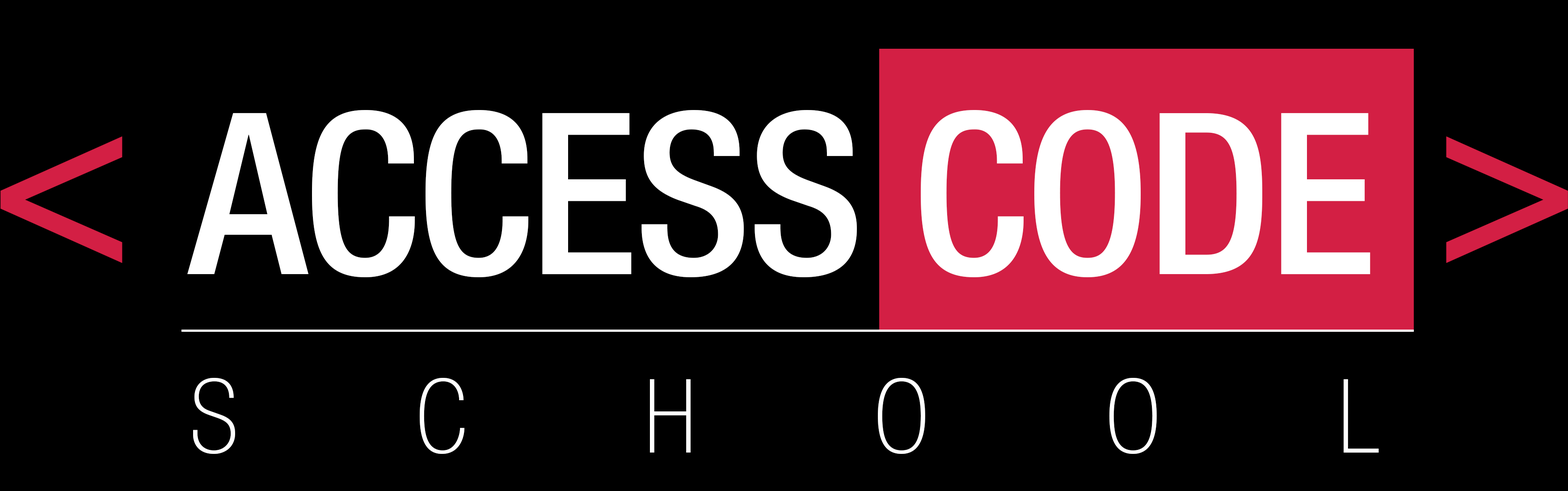
<style>
.page{position:relative;width:1568px;height:491px;background:#000000}
.page>*{position:absolute;margin:0}
.t1{font:225.4px "HelveticaNeueLTStd-MdCn";letter-spacing:-0.016em;color:#ffffff}
.t2{font:240.4px "HelveticaNeueLTStd-MdCn";letter-spacing:-0.016em;color:#d31f44}
.t3{font:102.4px "HelveticaNeueLTStd-ThCn";letter-spacing:-0.016em;color:#ffffff}
</style>
<div class="page">
<p class="t1" style="left:187px;top:110px;width:1183px;height:167px">ACCESS CODE</p>
<p class="t2" style="left:0px;top:136px;width:122px;height:127px">&lt;</p>
<p class="t2" style="left:1446px;top:136px;width:122px;height:127px;rotate:180deg">&lt;</p>
<p class="t3" style="left:193px;top:378px;width:1186px;height:76px">SCHOOL</p>
</div>
